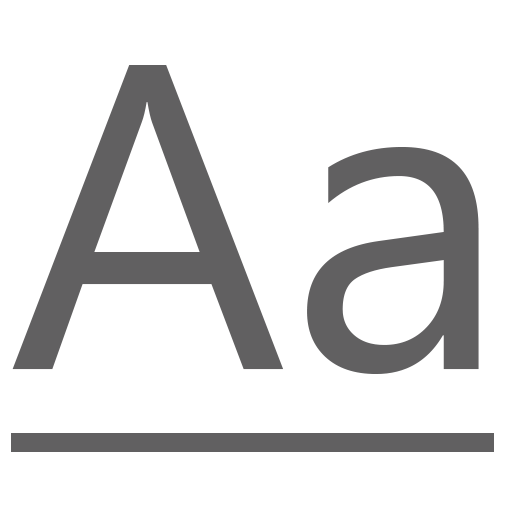
<style>
.page{position:relative;width:512px;height:512px;background:#ffffff}
.page>*{position:absolute;margin:0}
.t1{font:433.9px "SegoeUISymbol";color:#616061}
</style>
<div class="page">
<p class="t1" style="left:12px;top:65px;width:467px;height:309px">Aa</p>
</div>
